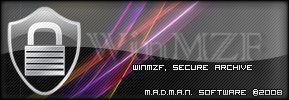
<style>
.page{position:relative;width:289px;height:100px}
.page>*{position:absolute;margin:0}
.t1{font:9.6px "VisitorTT1BRK";color:#ffffff}
.t2{font:9.6px "VisitorTT1BRK"}
</style>
<div class="page">
<p class="t1" style="left:133px;top:65px;width:119px;height:6px">winmzf, secure archive</p>
<p class="t2" style="left:145px;top:89px;width:137px;height:7px">m.a.d.m.a.n. software ©2008</p>
</div>
